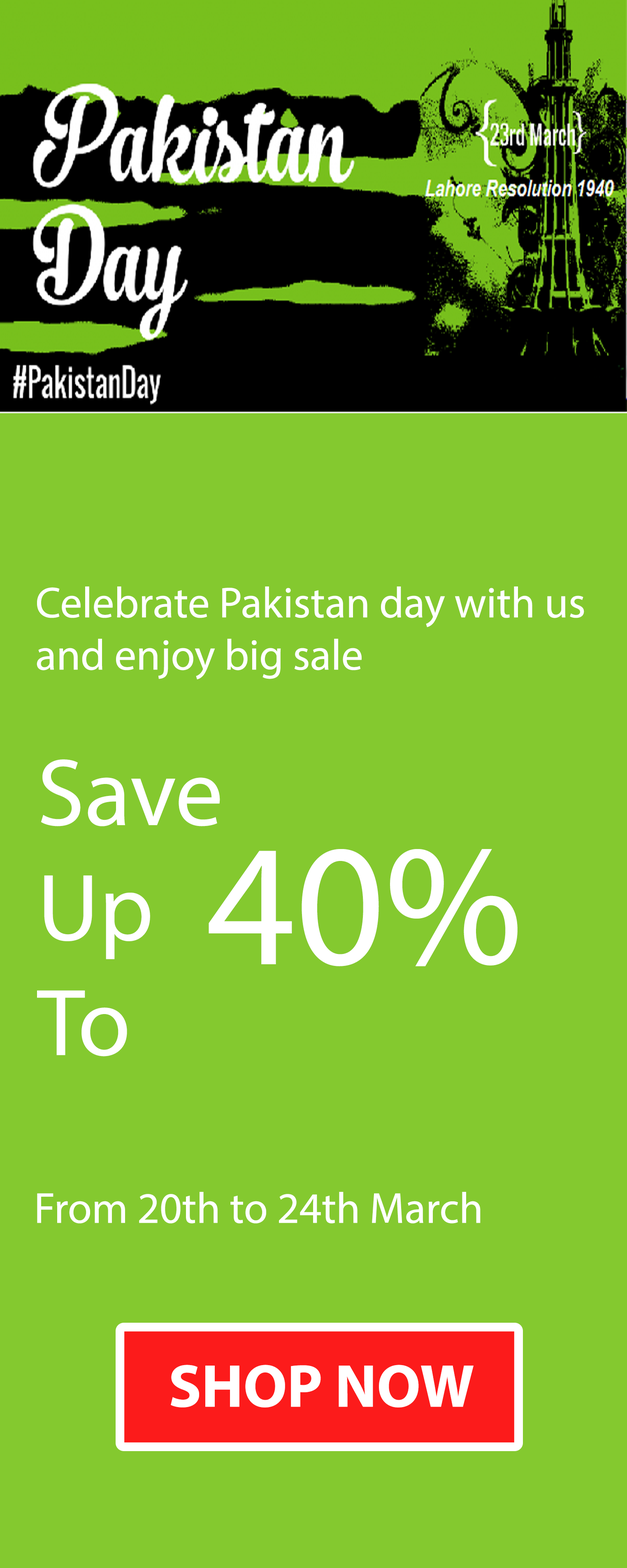
<style>
.page{position:relative;width:627px;height:1568px;background:#84c92f}
.page>*{position:absolute;margin:0}
.t1{font:43.6px "MyriadPro-Regular";color:#ffffff}
.t2{font:95.8px "MyriadPro-Regular";color:#ffffff}
.t3{font:174.2px "MyriadPro-Regular";color:#ffffff}
</style>
<div class="page">
<p class="t1" style="left:37px;top:586px;width:547px;height:93px">Celebrate Pakistan day with us <br>and enjoy big sale</p>
<p class="t2" style="left:37px;top:759px;width:183px;height:297px">Save <br>Up <br>To</p>
<p class="t3" style="left:209px;top:849px;width:309px;height:117px">40%</p>
<p class="t1" style="left:37px;top:1192px;width:444px;height:32px">From 20th to 24th March</p>
</div>
